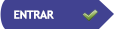
<style>
.page{position:relative;width:114px;height:30px;background:#414291}
.page>*{position:absolute;margin:0}
.t1{font:11.2px "TrebuchetMS-Bold";letter-spacing:-0.025em;color:#ffffff}
</style>
<div class="page">
<p class="t1" style="left:14px;top:10px;width:40px;height:9px">ENTRAR</p>
</div>
